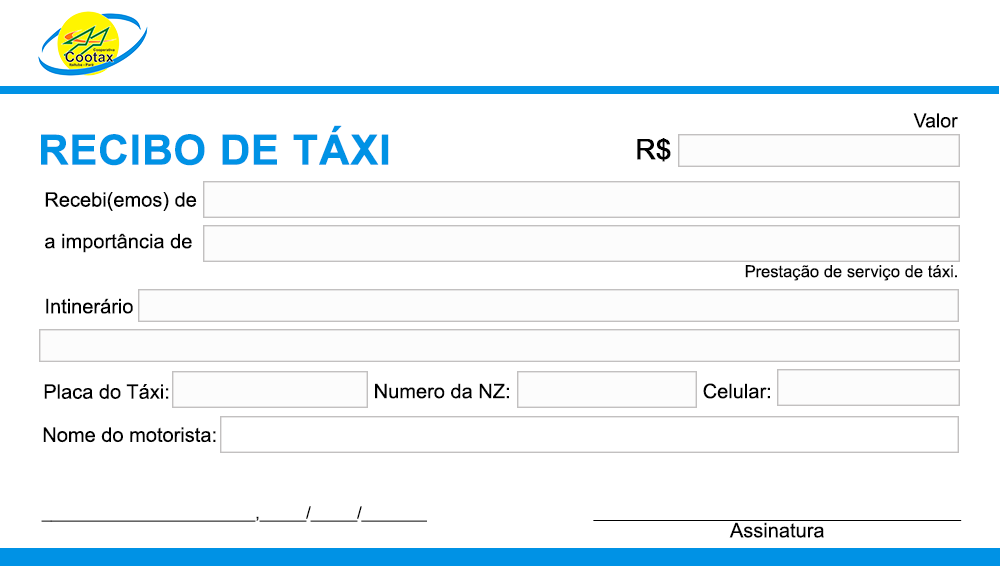
<style>
.page{position:relative;width:1000px;height:566px;background:#ffffff}
.page>*{position:absolute;margin:0}
.t1{font:19.4px "ArialMT";color:#000000}
.t2{font:41.6px "Arial-BoldMT";color:#0092e5;font-weight:bold}
.t3{font:27.7px "ArialMT";color:#000000;font-weight:bold}
.t4{font:20px/41.6px "ArialMT";color:#000000}
.t5{font:16.6px "ArialMT";color:#000000}
.t6{font:20px "ArialMT";color:#000000}
.t7{font:16.6px/19.4px "Ubuntu-Light";color:#000000}
.t8{font:20px/19.4px "ArialMT";color:#000000}
</style>
<div class="page">
<p class="t1" style="left:913px;top:113px;width:45px;height:15px">Valor</p>
<p class="t2" style="left:41px;top:125px;width:348px;height:41px">RECIBO DE TÁXI</p>
<p class="t3" style="left:637px;top:138px;width:34px;height:24px">R$</p>
<p class="t4" style="left:45px;top:192px;width:152px;height:61px">Recebi(emos) de<br>a importância de</p>
<p class="t5" style="left:745px;top:265px;width:212px;height:16px">Prestação de serviço de táxi.</p>
<p class="t6" style="left:46px;top:298px;width:87px;height:16px">Intinerário</p>
<p class="t6" style="left:44px;top:384px;width:125px;height:15px">Placa do Táxi:</p>
<p class="t6" style="left:375px;top:383px;width:134px;height:16px">Numero da NZ:</p>
<p class="t6" style="left:703px;top:383px;width:67px;height:16px">Celular:</p>
<p class="t6" style="left:43px;top:427px;width:173px;height:16px">Nome do motorista:</p>
<p class="t5" style="left:41px;top:506px;width:386px;height:16px">_______________________,_____/_____/_______</p>
<p class="t7" style="left:593px;top:520px;width:369px;height:18px;text-align:center">_____________________________________________<br><span class="t8">Assinatura</span></p>
</div>
